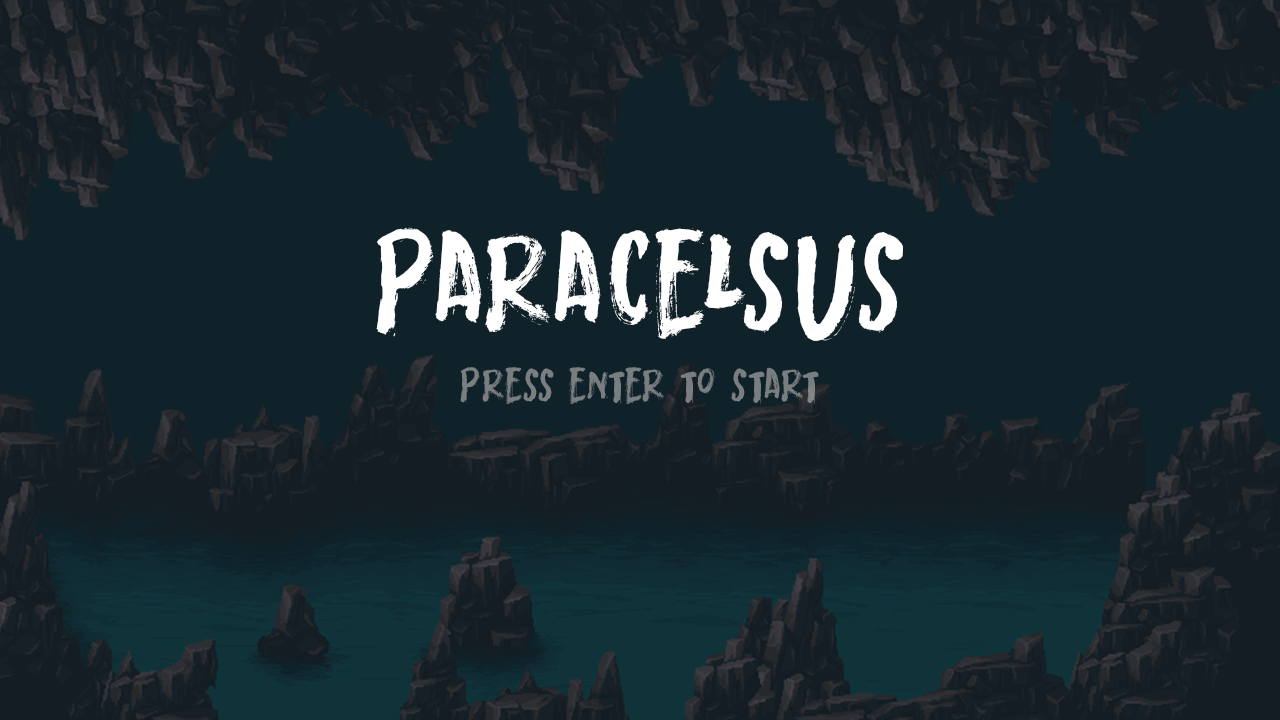
<style>
.page{position:relative;width:1280px;height:720px;background:#0f2129}
.page>*{position:absolute;margin:0}
.t1{font:150px "MortalCoilDEMO-Regular";color:#ffffff}
.t2{font:50px "MortalCoilDEMO-Regular";color:#797e81}
</style>
<div class="page">
<p class="t1" style="left:376px;top:227px;width:527px;height:114px">Paracelsus</p>
<p class="t2" style="left:460px;top:367px;width:359px;height:37px">Press enter to start</p>
</div>
